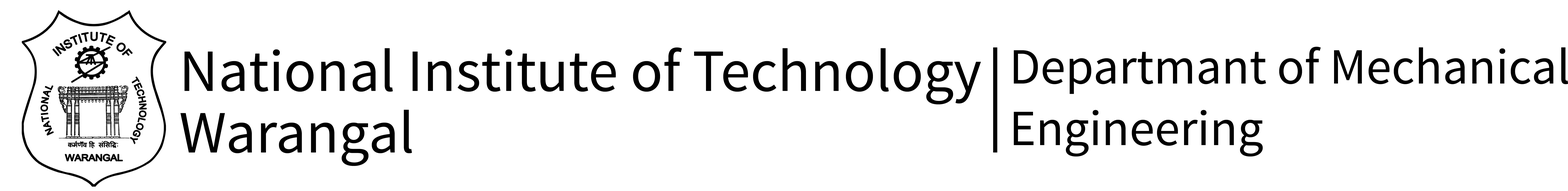
<style>
.page{position:relative;width:1568px;height:191px;background:#ffffff}
.page>*{position:absolute;margin:0}
.t1{font:60px/30.8px "SourceSansPro-Regular";color:#000000}
.t2{font:50.7px/30.8px "SourceSansPro-Regular";color:#000000}
</style>
<div class="page">
<p class="t1" style="left:180px;top:47px;width:801px;height:119px">National Institute of Technology <br><br>Warangal</p>
<p class="t2" style="left:1014px;top:47px;width:554px;height:110px">Departmant of Mechanical <br><br>Engineering</p>
</div>
